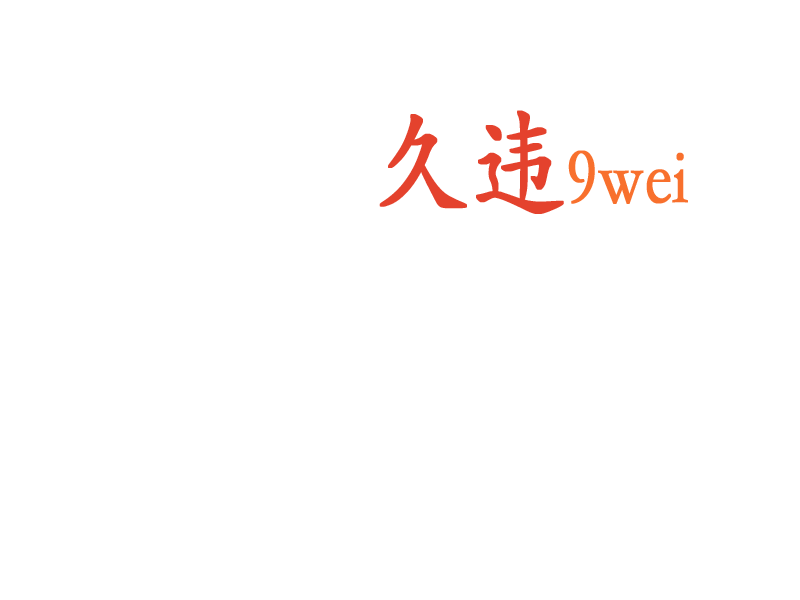
<style>
.page{position:relative;width:800px;height:600px;background:#ffffff}
.page>*{position:absolute;margin:0}
.t1{font:80px "STKaiti";color:#f8702d;font-weight:bold;scale:0.8 1}
.t2{font:120px "STKaiti";color:#e4422d;font-weight:bold;scale:0.8 1}
</style>
<div class="page">
<p class="t1" style="left:379px;top:110px;width:309px;height:104px"><span class="t2">久违</span>9wei</p>
</div>
